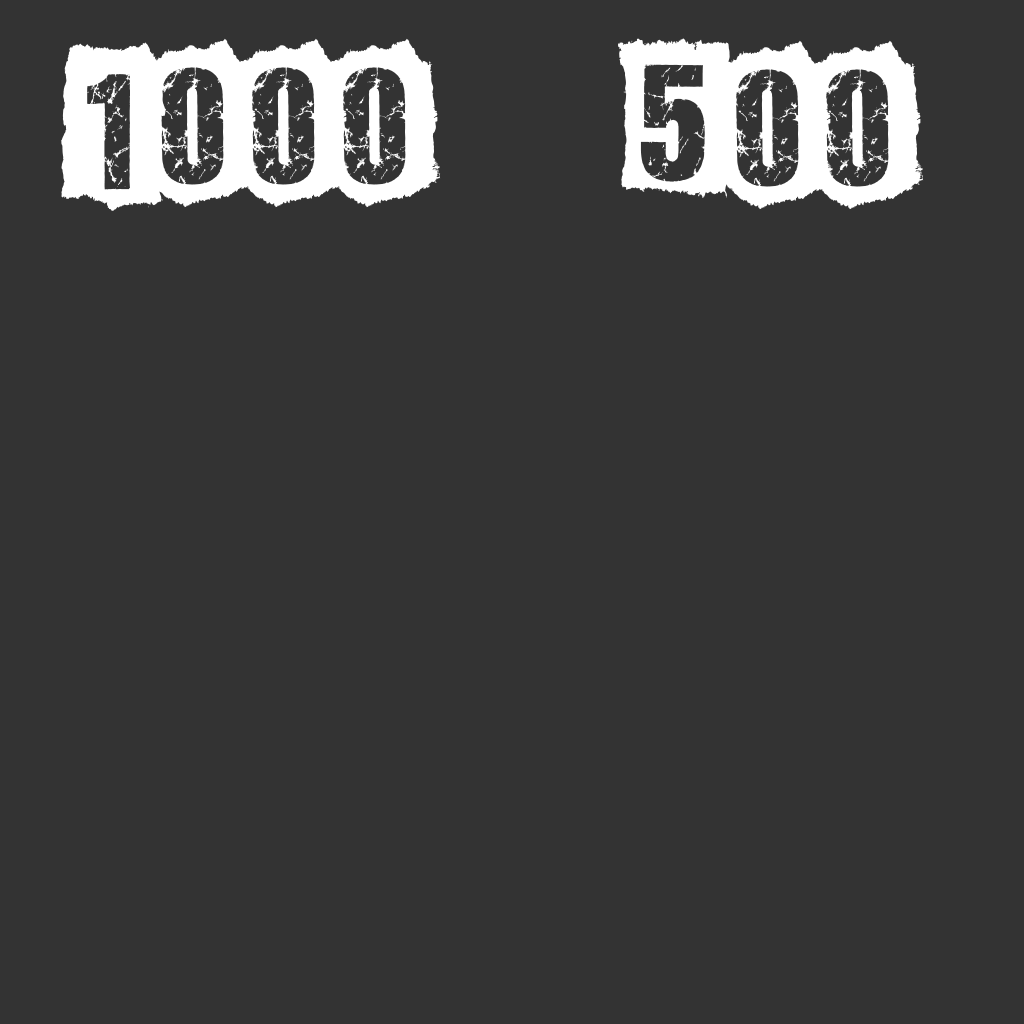
<style>
.page{position:relative;width:1024px;height:1024px;background:#333333}
.page>*{position:absolute;margin:0}
.t1{font:160px "ALLAGESDEMO";color:#ffffff}
</style>
<div class="page">
<p class="t1" style="left:61px;top:38px;width:380px;height:173px">1000</p>
<p class="t1" style="left:618px;top:38px;width:306px;height:172px">500</p>
</div>
